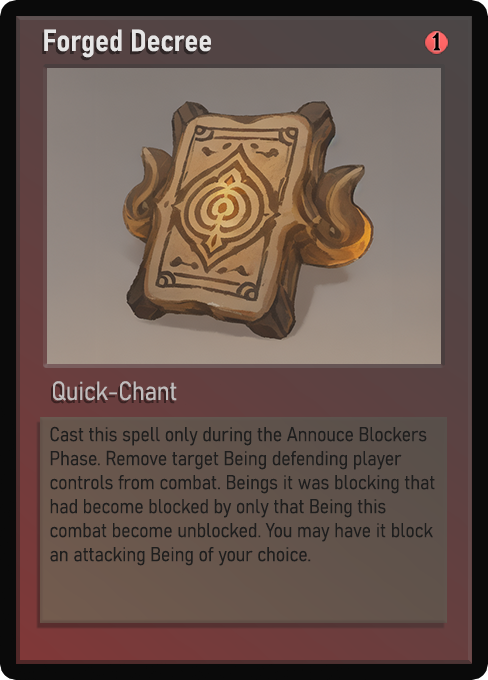
<style>
.page{position:relative;width:488px;height:680px}
.page>*{position:absolute;margin:0}
.t1{font:30px "Bahnschrift-SemiBoldSemiCondensed";color:#f2f2f2;font-weight:bold}
.t2{font:25px "WTRRoycroft";color:#000000;font-weight:bold;scale:1.09 1}
.t3{font:26px "Bahnschrift-LightSemiCondensed";color:#c8c8c8;font-weight:bold}
.t4{font:20px "Bahnschrift-LightSemiCondensed";color:#1e1e1e;font-weight:bold}
</style>
<div class="page">
<p class="t1" style="left:44px;top:29px;width:167px;height:29px;opacity:0.9">Forged Decree</p>
<p class="t2" style="left:432px;top:32px;width:9px;height:19px">1</p>
<p class="t3" style="left:53px;top:381px;width:124px;height:20px;opacity:0.9">Quick-Chant</p>
<p class="t4" style="left:50px;top:426px;width:385px;height:140px">Cast this spell only during the Annouce Blockers Phase. Remove target Being defending player controls from combat. Beings it was blocking that had become blocked by only that Being this combat become unblocked. You may have it block an attacking Being of your choice.</p>
</div>
